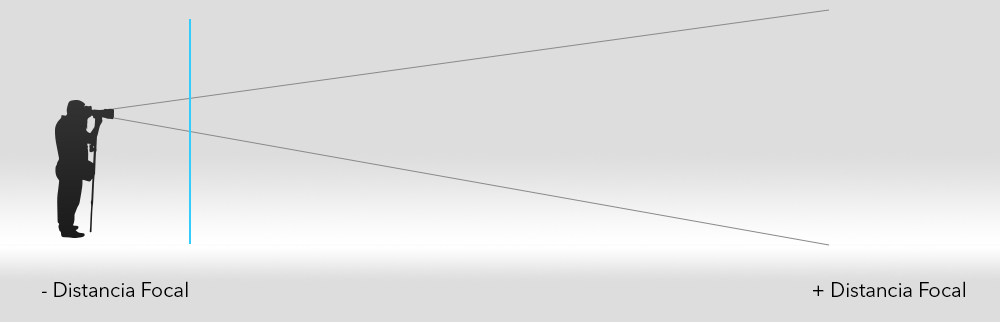
<style>
.page{position:relative;width:1000px;height:322px;background:#dddddd}
.page>*{position:absolute;margin:0}
.t1{font:20px "AvenirNextLTPro-Regular";color:#000000}
</style>
<div class="page">
<p class="t1" style="left:42px;top:281px;width:146px;height:16px">- Distancia Focal</p>
<p class="t1" style="left:813px;top:281px;width:152px;height:16px">+ Distancia Focal</p>
</div>
